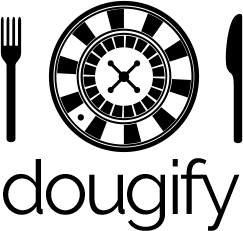
<style>
.page{position:relative;width:243px;height:231px;background:#ffffff}
.page>*{position:absolute;margin:0}
.t1{font:75.5px "Raleway-Regular";letter-spacing:-0.055em;color:#000000}
</style>
<div class="page">
<p class="t1" style="left:3px;top:158px;width:237px;height:73px">dougify</p>
</div>
